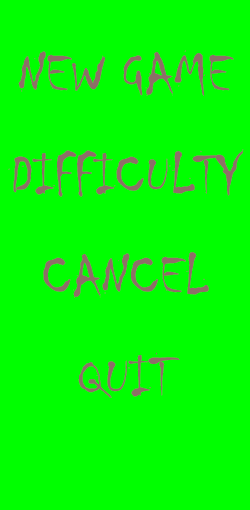
<style>
.page{position:relative;width:250px;height:510px;background:#00ff00}
.page>*{position:absolute;margin:0}
.t1{font:58.3px "Chiller-Regular";color:#8e6f67}
</style>
<div class="page">
<p class="t1" style="left:18px;top:50px;width:216px;height:46px">NEW GAME</p>
<p class="t1" style="left:8px;top:149px;width:236px;height:48px">DIFFICULTY</p>
<p class="t1" style="left:43px;top:252px;width:166px;height:46px">CANCEL</p>
<p class="t1" style="left:78px;top:352px;width:102px;height:46px">QUIT</p>
</div>
